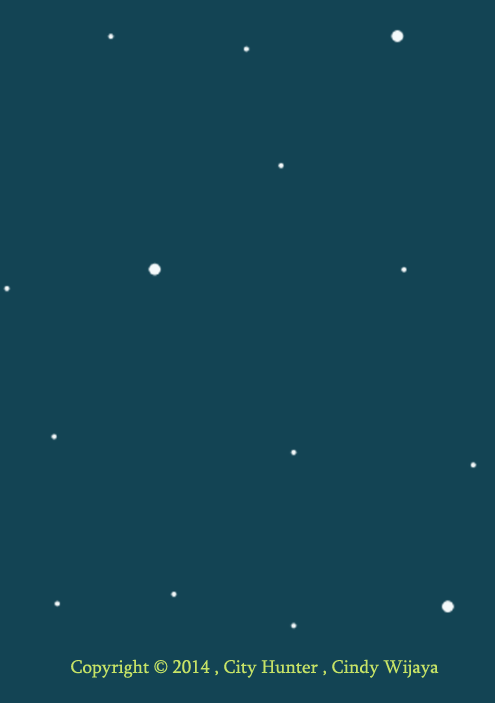
<style>
.page{position:relative;width:495px;height:703px;background:#134454}
.page>*{position:absolute;margin:0}
.t1{font:18.6px "Sylfaen";color:#c7e366}
</style>
<div class="page">
<p class="t1" style="left:71px;top:659px;width:368px;height:19px">Copyright © 2014 , City Hunter , Cindy Wijaya</p>
</div>
